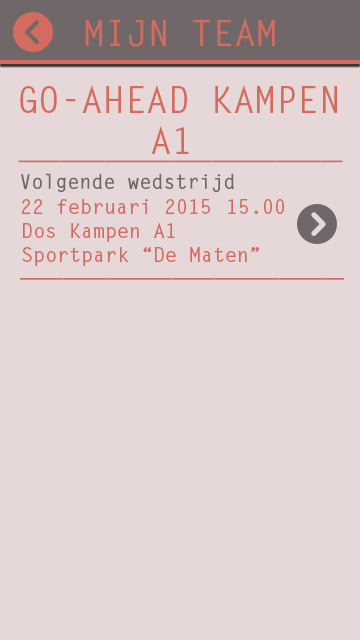
<style>
.page{position:relative;width:360px;height:640px;background:#e6d8d8}
.page>*{position:absolute;margin:0}
.t1{font:36px "LetterGothicStd-Bold";color:#d36c5e}
.t2{font:20px "LetterGothicStd-Bold";color:#706868}
.t3{font:20px "LetterGothicStd-Bold";color:#d36c5e}
</style>
<div class="page">
<p class="t1" style="left:85px;top:17px;width:190px;height:30px">MIJN TEAM</p>
<p class="t1" style="left:20px;top:84px;width:317px;height:29px">GO-AHEAD KAMPEN</p>
<p class="t1" style="left:151px;top:125px;width:38px;height:29px">A1</p>
<p class="t1" style="left:18px;top:160px;width:325px;height:3px">_______________</p>
<p class="t2" style="left:21px;top:173px;width:213px;height:19px">Volgende wedstrijd</p>
<p class="t3" style="left:22px;top:199px;width:188px;height:15px">22 februari 2015</p>
<p class="t3" style="left:228px;top:199px;width:56px;height:15px">15.00</p>
<p class="t3" style="left:22px;top:222px;width:237px;height:44px">Dos Kampen A1 <br>Sportpark “De Maten”</p>
<p class="t1" style="left:20px;top:278px;width:324px;height:2px">___________________________</p>
</div>
